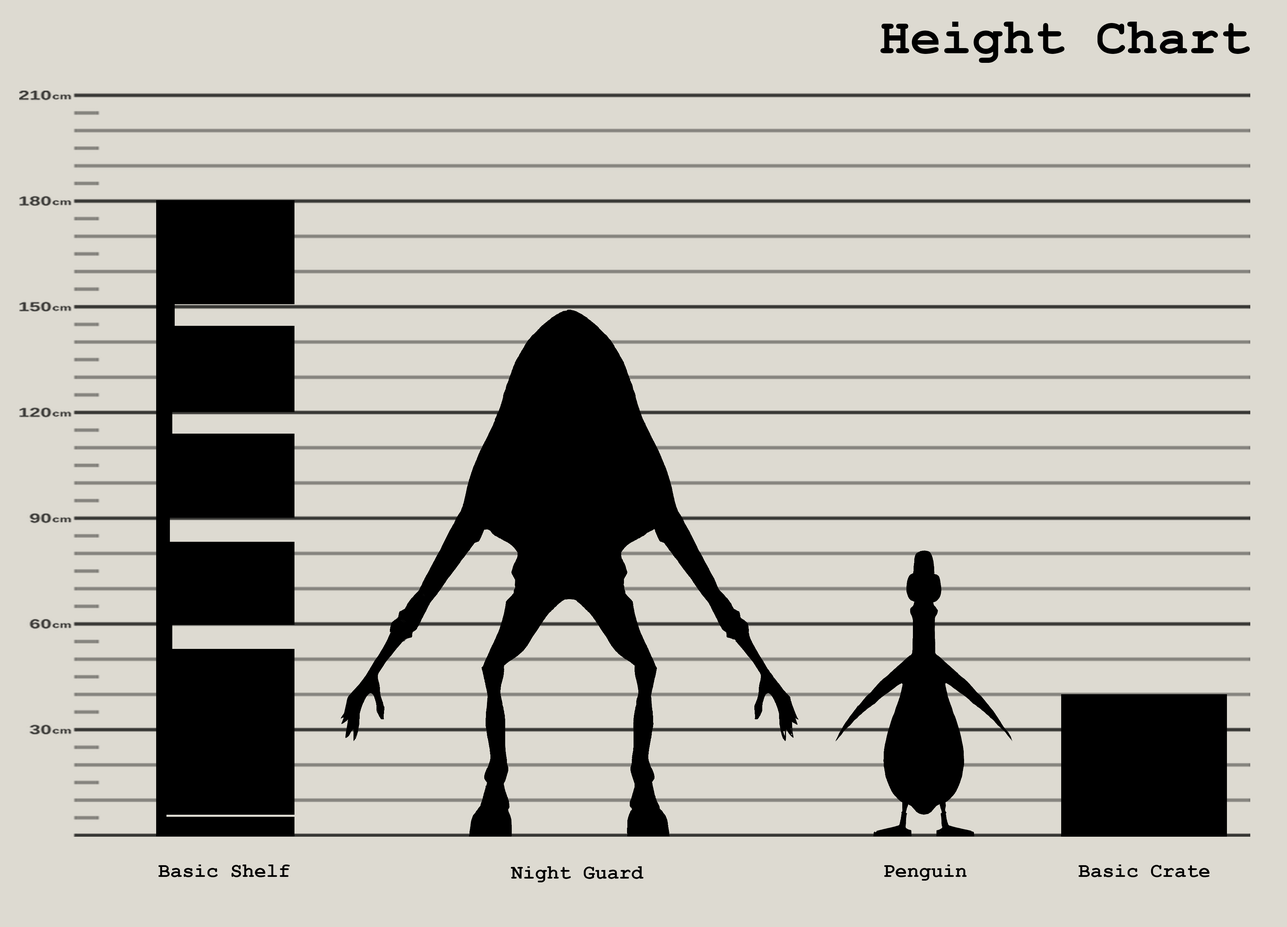
<style>
.page{position:relative;width:1287px;height:927px;background:#dddad1}
.page>*{position:absolute;margin:0}
.t1{font:51.5px "CourierNewPS-BoldMT";color:#000000}
.t2{font:20px "CourierNewPS-BoldMT";color:#000000}
</style>
<div class="page">
<p class="t1" style="left:880px;top:22px;width:370px;height:41px">Height Chart</p>
<p class="t2" style="left:158px;top:864px;width:132px;height:13px">Basic Shelf</p>
<p class="t2" style="left:511px;top:866px;width:132px;height:16px">Night Guard</p>
<p class="t2" style="left:884px;top:864px;width:83px;height:16px">Penguin</p>
<p class="t2" style="left:1078px;top:864px;width:131px;height:13px">Basic Crate</p>
</div>
